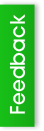
<style>
.page{position:relative;width:44px;height:131px}
.page>*{position:absolute;margin:0}
.t1{font:20px "AvantGardeLT-Medium";color:#ffffff}
</style>
<div class="page">
<p class="t1" style="left:9px;top:14px;width:17px;height:100px;rotate:-90deg">Feedback</p>
</div>
